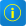
<style>
.page{position:relative;width:26px;height:26px;background:#0f7dca}
.page>*{position:absolute;margin:0}
.t1{font:18px "KozGoPr6N-Heavy";color:#ffff00}
</style>
<div class="page">
<p class="t1" style="left:4px;top:4px;width:17px;height:18px">ⓘ</p>
</div>
